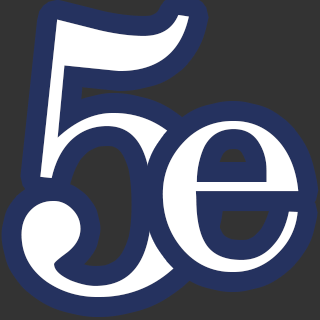
<style>
.page{position:relative;width:320px;height:320px;background:#25325f}
.page>*{position:absolute;margin:0}
.t1{font:400px "Modesto";color:#ffffff}
.t2{font:320px "Modesto";color:#ffffff}
</style>
<div class="page">
<p class="t1" style="left:21px;top:15px;width:183px;height:282px">5</p>
<p class="t2" style="left:162px;top:121px;width:137px;height:151px">e</p>
</div>
